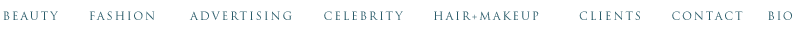
<style>
.page{position:relative;width:800px;height:30px;background:#ffffff}
.page>*{position:absolute;margin:0}
.t1{font:11px "TrajanPro-Regular";letter-spacing:0.165em;color:#285a68}
</style>
<div class="page">
<p class="t1" style="left:3px;top:11px;width:55px;height:9px">BEAUTY</p>
<p class="t1" style="left:89px;top:11px;width:66px;height:9px">FASHION</p>
<p class="t1" style="left:189px;top:11px;width:103px;height:9px">ADVERTISING</p>
<p class="t1" style="left:324px;top:11px;width:79px;height:9px">CELEBRITY</p>
<p class="t1" style="left:434px;top:11px;width:105px;height:9px">HAIR+MAKEUP</p>
<p class="t1" style="left:579px;top:11px;width:61px;height:9px">CLIENTS</p>
<p class="t1" style="left:672px;top:11px;width:71px;height:9px">CONTACT</p>
<p class="t1" style="left:768px;top:11px;width:24px;height:9px">BIO</p>
</div>
